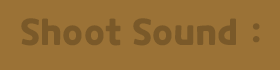
<style>
.page{position:relative;width:280px;height:70px;background:#9b7236}
.page>*{position:absolute;margin:0}
.t1{font:36px "CookieRun-Bold";color:#7a5929}
</style>
<div class="page">
<p class="t1" style="left:21px;top:18px;width:215px;height:28px">Shoot Sound</p>
<p class="t1" style="left:252px;top:23px;width:8px;height:20px">:</p>
</div>
